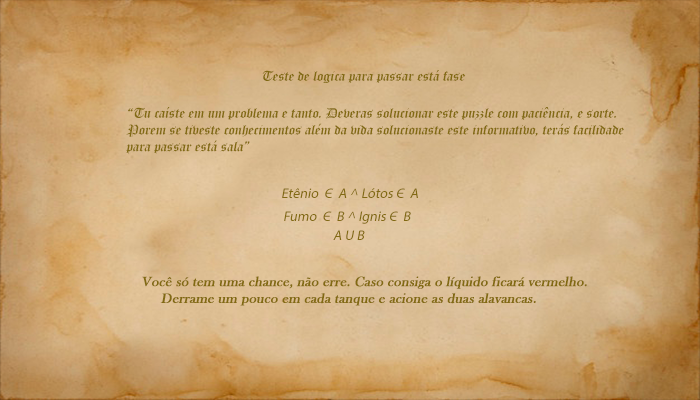
<style>
.page{position:relative;width:700px;height:400px}
.page>*{position:absolute;margin:0}
.t1{font:14px "OldEnglishTextMT";color:#826a12;font-style:italic}
.t2{font:14px "MyriadPro-Regular";color:#826a12;font-style:italic}
.t3{font:14px "BaskOldFace";color:#826a12;font-weight:bold;font-style:italic}
</style>
<div class="page">
<p class="t1" style="left:262px;top:70px;width:204px;height:13px">Teste de logica para passar está fase</p>
<p class="t1" style="left:126px;top:107px;width:498px;height:47px">“Tu caíste em um problema e tanto. Deveras solucionar este puzzle com paciência, e sorte. <br>Porem se tiveste conhecimentos além da vida solucionaste este informativo, terás facilidade <br>para passar está sala”</p>
<p class="t2" style="left:282px;top:188px;width:136px;height:10px">Etênio  Є  A ^ Lótos Є  A</p>
<p class="t2" style="left:284px;top:211px;width:127px;height:13px">Fumo  Є  B ^ Ignis Є  B</p>
<p class="t2" style="left:333px;top:230px;width:32px;height:10px">A U B</p>
<p class="t3" style="left:142px;top:276px;width:445px;height:30px">Você só tem uma chance, não erre. Caso consiga o líquido ficará vermelho. <br>     Derrame um pouco em cada tanque e acione as duas alavancas.</p>
</div>
